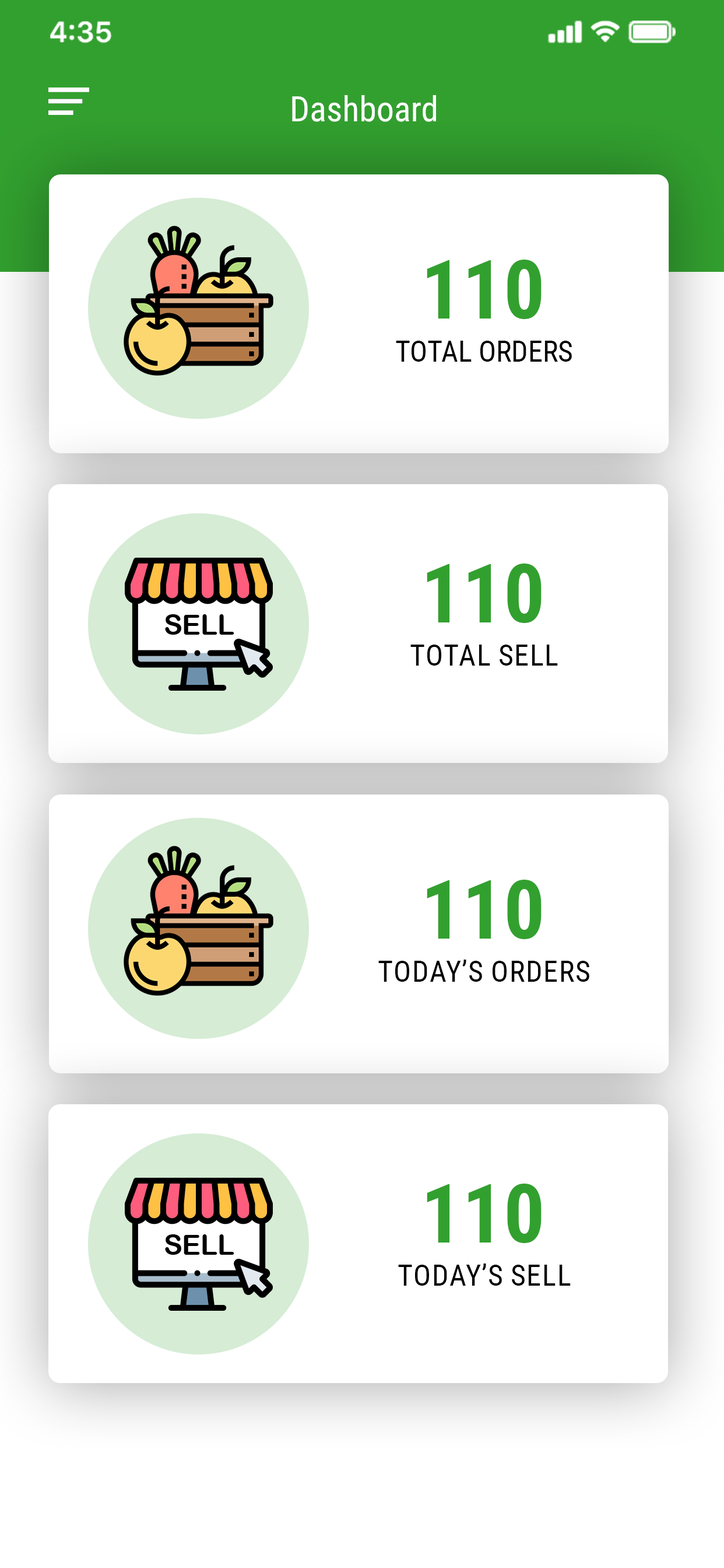
<style>
.page{position:relative;width:724px;height:1568px;background:#ffffff}
.page>*{position:absolute;margin:0}
.t1{font:35px "RobotoCondensed-Regular";color:#ffffff}
.t2{font:81.7px "RobotoCondensed-Bold";color:#32a02f}
.t3{font:29.2px "RobotoCondensed-Regular";color:#000000}
.t4{font:29.2px "RobotoCondensed-Regular";color:#000000;text-transform:uppercase}
</style>
<div class="page">
<p class="t1" style="left:292px;top:95px;width:144px;height:27px">Dashboard</p>
<p class="t2" style="left:427px;top:260px;width:115px;height:59px">110</p>
<p class="t3" style="left:396px;top:341px;width:176px;height:21px">TOTAL ORDERS</p>
<p class="t2" style="left:427px;top:564px;width:115px;height:59px">110</p>
<p class="t4" style="left:411px;top:645px;width:147px;height:21px">TOTAL Sell</p>
<p class="t2" style="left:427px;top:880px;width:115px;height:59px">110</p>
<p class="t4" style="left:379px;top:960px;width:211px;height:22px">Today’s ORDERS</p>
<p class="t2" style="left:427px;top:1184px;width:115px;height:59px">110</p>
<p class="t4" style="left:398px;top:1264px;width:173px;height:22px">Today’s Sell</p>
</div>
